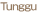
<style>
.page{position:relative;width:38px;height:15px;background:#ffffff}
.page>*{position:absolute;margin:0}
.t1{font:10px "GothicMB101Pro-DeBold";letter-spacing:-0.08em;color:#8b6e51}
</style>
<div class="page">
<p class="t1" style="left:0px;top:2px;width:37px;height:10px;opacity:0.9">Tunggu</p>
</div>
